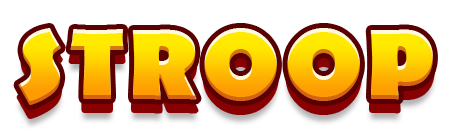
<style>
.page{position:relative;width:451px;height:133px;background:#ffffff}
.page>*{position:absolute;margin:0}
.t1{font:100px "BerlinSansFB-Bold";letter-spacing:0.05em;text-transform:uppercase}
</style>
<div class="page">
<p class="t1" style="left:18px;top:28px;width:415px;height:77px">stroop</p>
</div>
